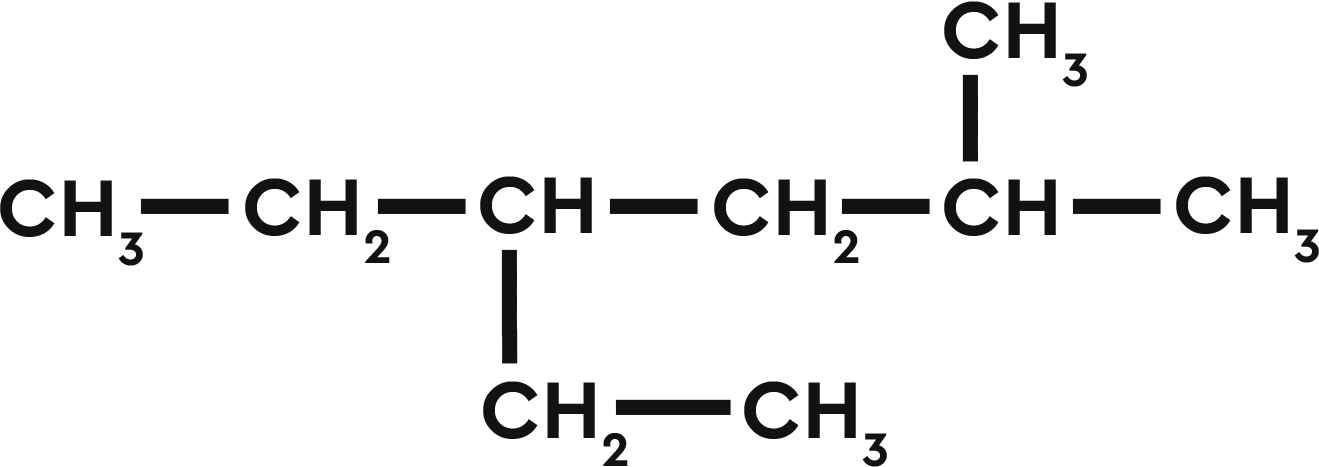
<style>
.page{position:relative;width:1319px;height:467px;background:#ffffff}
.page>*{position:absolute;margin:0}
.t1{font:84.4px "CeraPro-Bold";color:#121212}
.t2{font:133.1px "CeraPro-Bold";color:#121212}
</style>
<div class="page">
<p class="t1" style="left:944px;top:1px;width:143px;height:86px">CH3</p>
<p class="t2" style="left:962px;top:74px;width:16px;height:88px;rotate:90deg">---</p>
<p class="t1" style="left:0px;top:179px;width:143px;height:87px">CH3</p>
<p class="t1" style="left:245px;top:178px;width:145px;height:85px">CH2</p>
<p class="t1" style="left:480px;top:176px;width:112px;height:58px">CH</p>
<p class="t1" style="left:714px;top:178px;width:145px;height:85px">CH2</p>
<p class="t1" style="left:944px;top:178px;width:112px;height:58px">CH</p>
<p class="t1" style="left:1176px;top:176px;width:143px;height:87px">CH3</p>
<p class="t2" style="left:140px;top:198px;width:89px;height:16px">---</p>
<p class="t2" style="left:377px;top:198px;width:89px;height:16px">---</p>
<p class="t2" style="left:609px;top:198px;width:89px;height:16px">---</p>
<p class="t2" style="left:841px;top:198px;width:89px;height:16px">---</p>
<p class="t2" style="left:1072px;top:198px;width:89px;height:16px">---</p>
<p class="t2" style="left:501px;top:249px;width:17px;height:115px;rotate:90deg">----</p>
<p class="t1" style="left:483px;top:381px;width:145px;height:85px">CH2</p>
<p class="t1" style="left:744px;top:381px;width:143px;height:86px">CH3</p>
<p class="t2" style="left:615px;top:399px;width:116px;height:16px">----</p>
</div>
